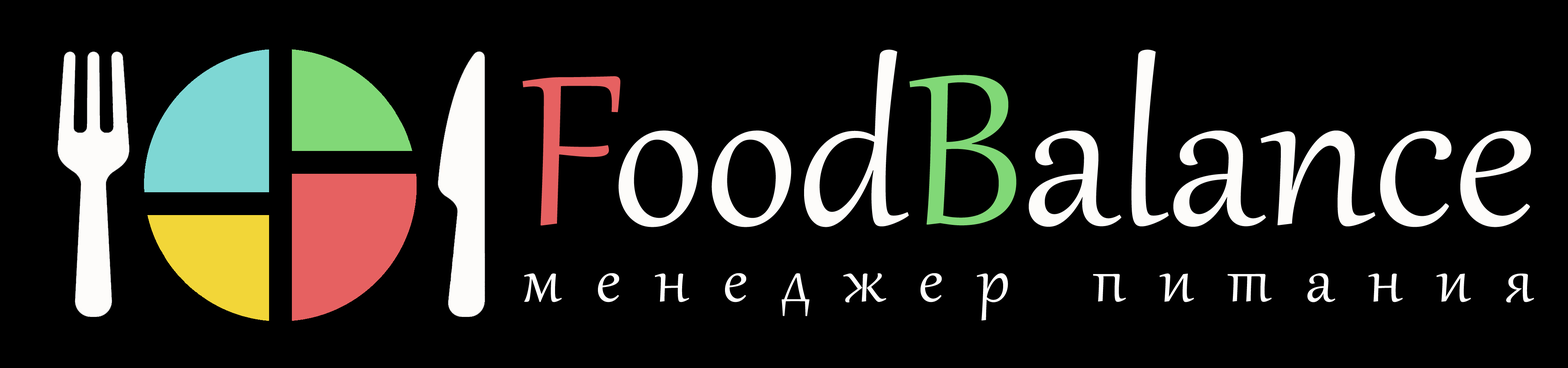
<style>
.page{position:relative;width:1568px;height:368px;background:#000000}
.page>*{position:absolute;margin:0}
.t1{font:262.3px "Gabriola";color:#fdfcfa}
.t2{font:262.3px "Gabriola";color:#e66161}
.t3{font:262.3px "Gabriola";color:#81d877}
.t4{font:78.7px "Gabriola";letter-spacing:0.44em;color:#ffffff}
</style>
<div class="page">
<p class="t1" style="left:522px;top:50px;width:1009px;height:177px"><span class="t2">F</span>ood<span class="t3">B</span>alance</p>
<p class="t4" style="left:524px;top:273px;width:1010px;height:48px">менеджер питания</p>
</div>
